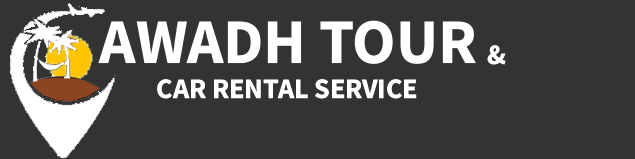
<style>
.page{position:relative;width:635px;height:159px;background:#333333}
.page>*{position:absolute;margin:0}
.t1{font:63.5px "SourceSansRoman-Bold";color:#ffffff}
.t2{font:28.2px "SourceSansRoman-Bold";color:#ffffff}
</style>
<div class="page">
<p class="t1" style="left:98px;top:20px;width:378px;height:44px">AWADH TOUR</p>
<p class="t2" style="left:487px;top:45px;width:19px;height:20px">&amp;</p>
<p class="t2" style="left:157px;top:79px;width:260px;height:20px">CAR RENTAL SERVICE</p>
</div>
